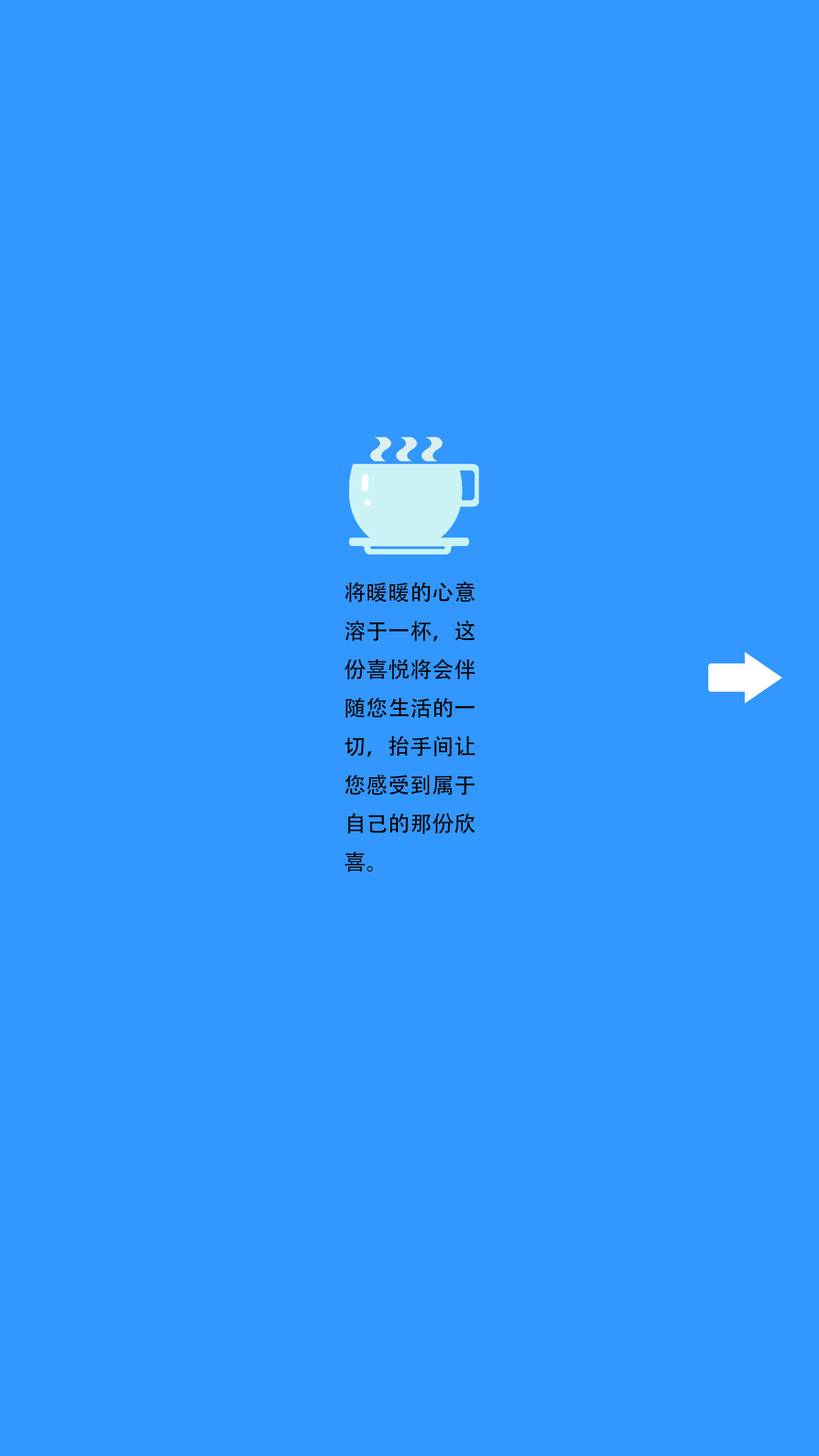
<style>
.page{position:relative;width:819px;height:1456px;background:#3297ff}
.page>*{position:absolute;margin:0}
.t1{font:22px "AdobeHeitiStd-Regular";color:#050505}
</style>
<div class="page">
<p class="t1" style="left:344px;top:582px;width:131px;height:290px">将暖暖的心意<br>溶于一杯，这<br>份喜悦将会伴<br>随您生活的一<br>切，抬手间让<br>您感受到属于<br>自己的那份欣<br>喜。</p>
</div>
